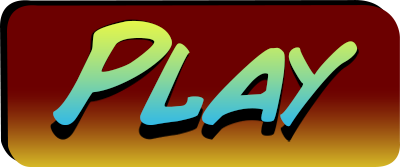
<style>
.page{position:relative;width:400px;height:167px;background:#6c0000}
.page>*{position:absolute;margin:0}
.t1{font:138.4px "ComicBook-Italic"}
</style>
<div class="page">
<p class="t1" style="left:53px;top:20px;width:305px;height:107px">Play</p>
</div>
